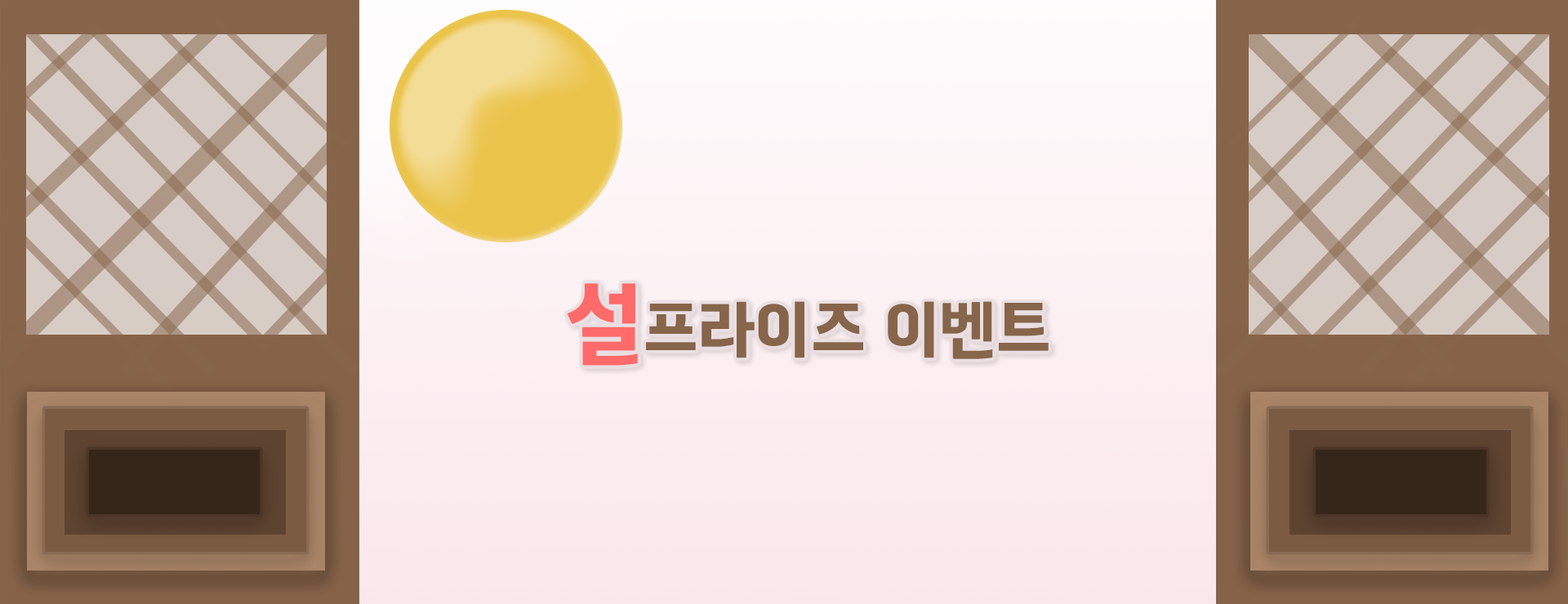
<style>
.page{position:relative;width:1568px;height:604px}
.page>*{position:absolute;margin:0}
.t1{font:58.8px "SuseongDotum-Regular";color:#86654a;text-transform:uppercase}
.t2{font:81.7px "SuseongDotum-Regular";color:#ff6a6a;text-transform:uppercase}
</style>
<div class="page">
<p class="t1" style="left:567px;top:283px;width:482px;height:83px"><span class="t2">설</span>프라이즈 이벤트</p>
</div>
